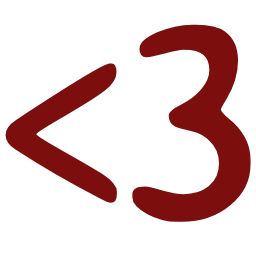
<style>
.page{position:relative;width:256px;height:256px;background:#ffffff}
.page>*{position:absolute;margin:0}
.t1{font:290.9px "AveriaSansLibre-Regular";letter-spacing:-0.089em;color:#7d0e0e}
</style>
<div class="page">
<p class="t1" style="left:5px;top:24px;width:246px;height:198px">&lt;3</p>
</div>
